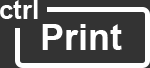
<style>
.page{position:relative;width:150px;height:68px;background:#333333}
.page>*{position:absolute;margin:0}
.t1{font:26px "Arial-BoldMT";color:#ffffff}
.t2{font:36px "Arial-BoldMT";color:#ffffff}
</style>
<div class="page">
<p class="t1" style="left:0px;top:0px;width:38px;height:19px">ctrl</p>
<p class="t2" style="left:42px;top:24px;width:80px;height:26px">Print</p>
</div>
